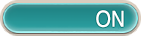
<style>
.page{position:relative;width:141px;height:36px}
.page>*{position:absolute;margin:0}
.t1{font:22px "FutoGoB101Pr5-Bold";letter-spacing:-0.04em;color:#ffffff;scale:0.9 1}
</style>
<div class="page">
<p class="t1" style="left:96px;top:10px;width:28px;height:18px">ON</p>
</div>
